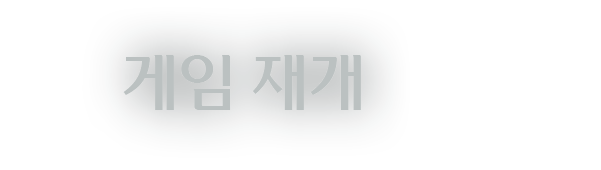
<style>
.page{position:relative;width:601px;height:170px;background:#ffffff}
.page>*{position:absolute;margin:0}
.t1{font:59.7px "WooridaumR";color:#bbc1c1}
</style>
<div class="page">
<p class="t1" style="left:123px;top:55px;width:238px;height:55px">게임 재개</p>
</div>
